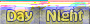
<style>
.page{position:relative;width:90px;height:24px}
.page>*{position:absolute;margin:0}
.t1{font:13px "HoboStd";scale:1.2 1}
</style>
<div class="page">
<p class="t1" style="left:7px;top:10px;width:26px;height:11px">Day</p>
<p class="t1" style="left:46px;top:9px;width:37px;height:12px">Night</p>
</div>
